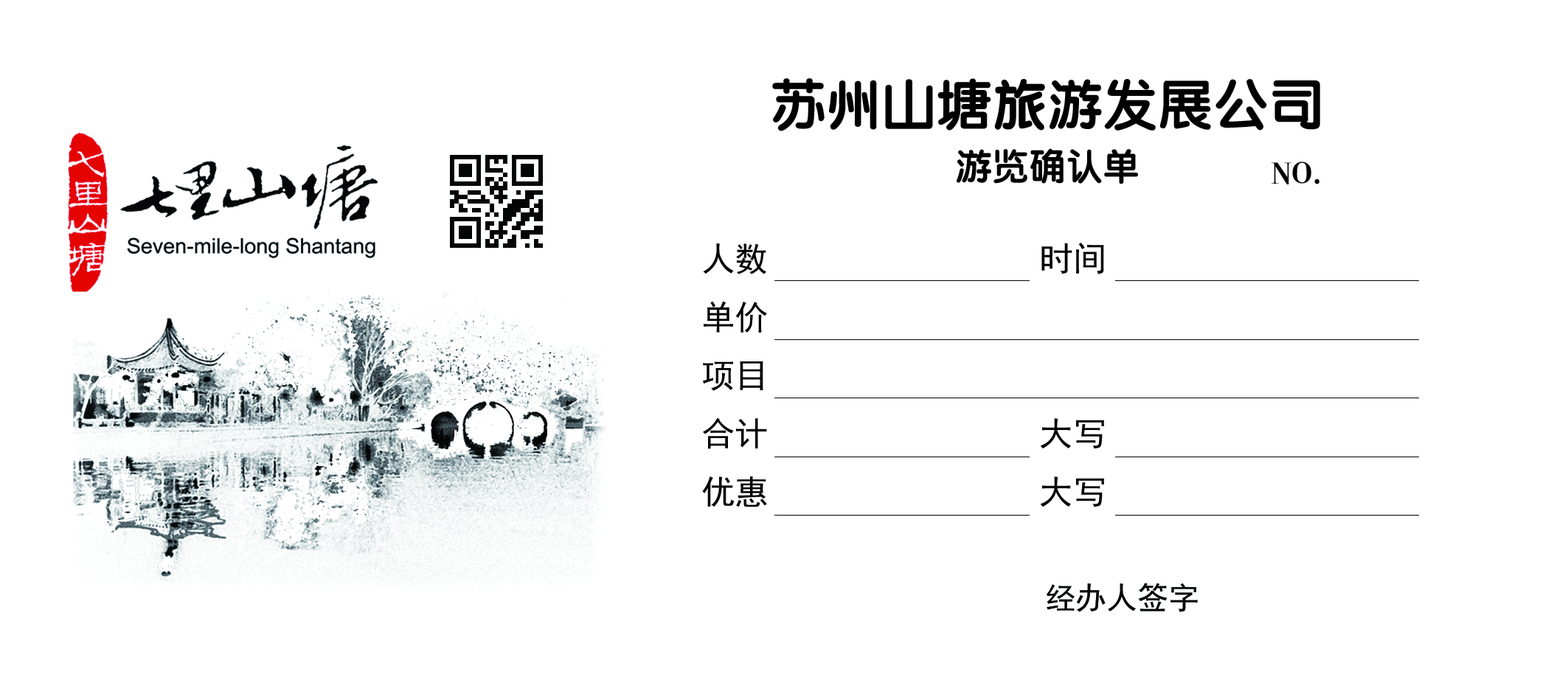
<style>
.page{position:relative;width:1568px;height:697px;background:#ffffff}
.page>*{position:absolute;margin:0}
.t1{font:55.3px/55.3px "FZY4JW--GB1-0";color:#000000}
.t2{font:36.9px/55.3px "FZY4JW--GB1-0";color:#000000}
.t3{font:30.7px "ç»å¸ç²å®ç®-regular";color:#000000}
.t4{font:33.8px/58.4px "SimHei";color:#000000}
.t5{font:30.7px "SimHei";color:#040606}
</style>
<div class="page">
<p class="t1" style="left:772px;top:78px;width:548px;height:106px;text-align:center">苏州山塘旅游发展公司<br><span class="t2">游览确认单</span></p>
<p class="t3" style="left:1271px;top:162px;width:48px;height:22px">NO.</p>
<p class="t4" style="left:702px;top:243px;width:402px;height:264px">人数                时间 <br>单价                               <br>项目     <br>合计                大写<br>优惠                大写</p>
<p class="t5" style="left:1047px;top:583px;width:151px;height:29px">经办人签字</p>
</div>
